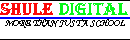
<style>
.page{position:relative;width:130px;height:40px;background:#ffffff}
.page>*{position:absolute;margin:0}
.t1{font:18px "Algerian";color:#07f718;text-transform:uppercase}
.t2{font:18px "Algerian";color:#fc0909;text-transform:uppercase}
.t3{font:10px "MonotypeCorsiva";color:#050505;text-transform:uppercase}
</style>
<div class="page">
<p class="t1" style="left:0px;top:3px;width:128px;height:12px"><span class="t2">shule </span>digital</p>
<p class="t3" style="left:5px;top:19px;width:120px;height:9px">more than just a school</p>
</div>
